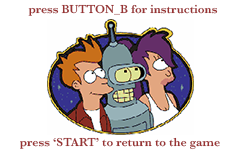
<style>
.page{position:relative;width:240px;height:160px;background:#ffffff}
.page>*{position:absolute;margin:0}
.t1{font:12px "Baskerville-SemiBold";color:#993333}
</style>
<div class="page">
<p class="t1" style="left:28px;top:4px;width:190px;height:12px">press BUTTON_B for instructions</p>
<p class="t1" style="left:20px;top:137px;width:200px;height:13px">press ‘START’ to return to the game</p>
</div>
